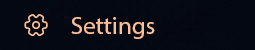
<style>
.page{position:relative;width:255px;height:50px;background:#040813}
.page>*{position:absolute;margin:0}
.t1{font:25px "MyriadPro-Regular";color:#febf97}
</style>
<div class="page">
<p class="t1" style="left:71px;top:17px;width:84px;height:22px">Settings</p>
</div>
